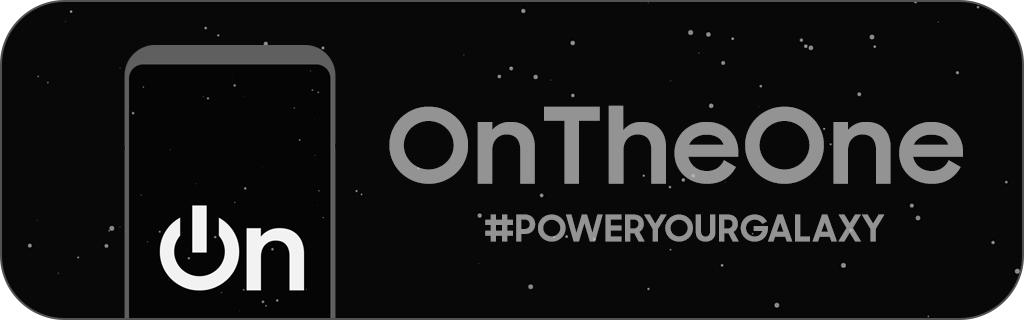
<style>
.page{position:relative;width:1024px;height:320px;background:#080808}
.page>*{position:absolute;margin:0}
.t1{font:105px "SamsungSharpSans-Bold";letter-spacing:0.025em;color:#939393}
.t2{font:36.6px "SamsungSharpSans-Bold";letter-spacing:0.025em;color:#939393}
</style>
<div class="page">
<p class="t1" style="left:389px;top:105px;width:574px;height:79px">OnTheOne</p>
<p class="t2" style="left:485px;top:214px;width:400px;height:28px">#POWERYOURGALAXY</p>
</div>
